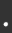
<style>
.page{position:relative;width:12px;height:33px;background:#333333}
.page>*{position:absolute;margin:0}
.t1{font:28.3px "Merriweather-Regular";color:#ffffff}
</style>
<div class="page">
<p class="t1" style="left:3px;top:22px;width:5px;height:5px">.</p>
</div>
